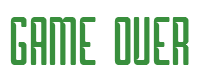
<style>
.page{position:relative;width:200px;height:80px;background:#ffffff}
.page>*{position:absolute;margin:0}
.t1{font:72px "Borg";color:#398f3d}
</style>
<div class="page">
<p class="t1" style="left:10px;top:17px;width:179px;height:48px">GAME OVER</p>
</div>
